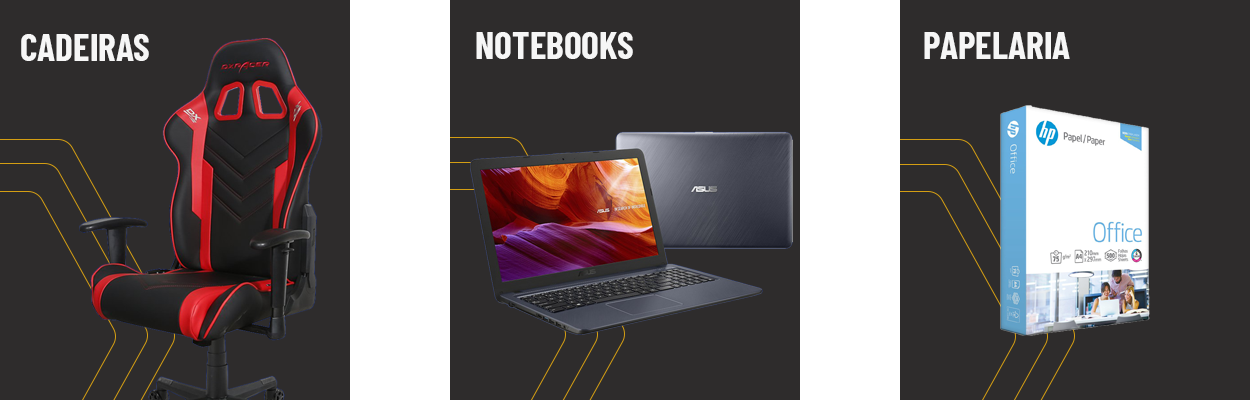
<style>
.page{position:relative;width:1250px;height:400px;background:#2e2c2c}
.page>*{position:absolute;margin:0}
.t1{font:37.5px "BarlowCondensed-Bold";color:#f6f6f6}
</style>
<div class="page">
<p class="t1" style="left:21px;top:34px;width:128px;height:27px">CADEIRAS</p>
<p class="t1" style="left:476px;top:32px;width:157px;height:27px">NOTEBOOKS</p>
<p class="t1" style="left:924px;top:32px;width:146px;height:27px">PAPELARIA</p>
</div>
